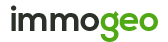
<style>
.page{position:relative;width:168px;height:42px;background:#ffffff}
.page>*{position:absolute;margin:0}
.t1{font:36px "NexaBold";letter-spacing:-0.025em;color:#2b3128}
.t2{font:36px "NexaBold";letter-spacing:-0.025em;color:#50a914}
</style>
<div class="page">
<p class="t1" style="left:11px;top:5px;width:147px;height:37px">immo<span class="t2">geo</span></p>
</div>
